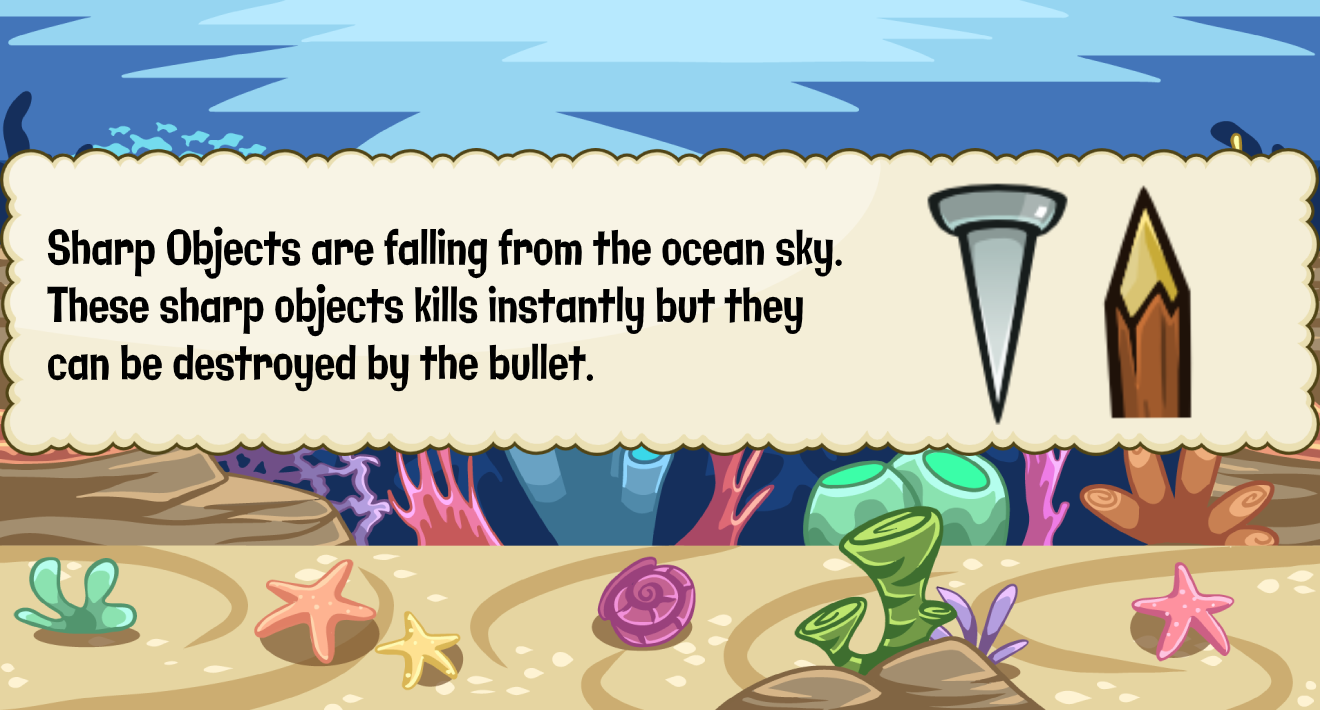
<style>
.page{position:relative;width:1320px;height:710px}
.page>*{position:absolute;margin:0}
.t1{font:47.9px "Galindo-Regular";color:#000000;scale:0.71 1}
</style>
<div class="page">
<p class="t1" style="left:47px;top:226px;width:795px;height:166px">Sharp Objects are falling from the ocean sky.<br>These sharp objects kills instantly but they<br>can be destroyed by the bullet.</p>
</div>
